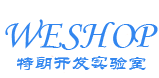
<style>
.page{position:relative;width:159px;height:78px;background:#ffffff}
.page>*{position:absolute;margin:0}
.t1{font:40px "STLiti";color:#3286ef}
.t2{font:18.7px "STLiti";color:#3286ef}
</style>
<div class="page">
<p class="t1" style="left:5px;top:19px;width:153px;height:31px">WESHOP</p>
<p class="t2" style="left:17px;top:56px;width:129px;height:14px">特朗开发实验室</p>
</div>
